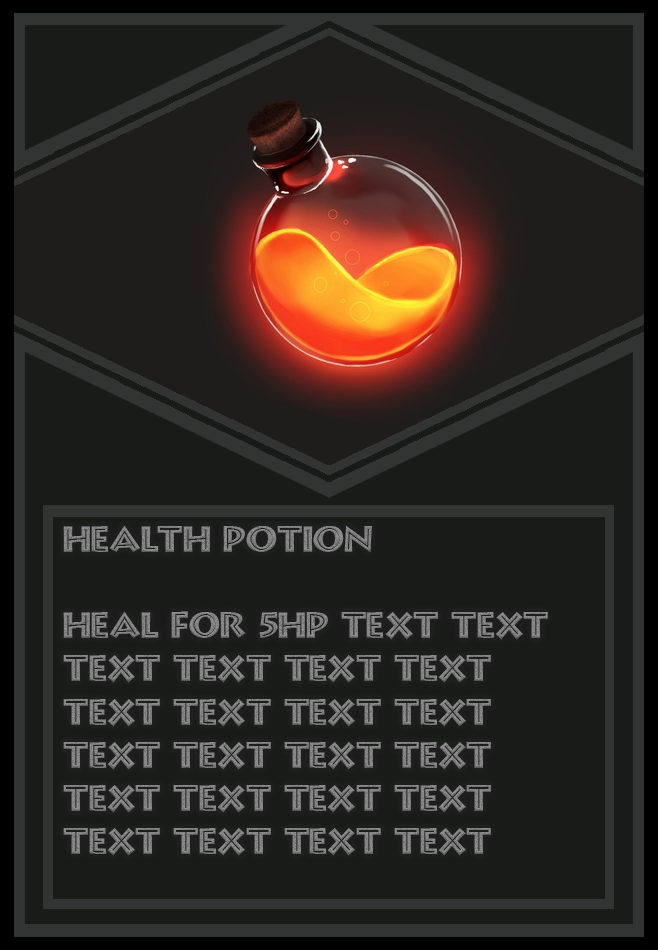
<style>
.page{position:relative;width:658px;height:950px;background:#191b19}
.page>*{position:absolute;margin:0}
.t1{font:36px "GreekDinerInlineTT";color:#828282}
</style>
<div class="page">
<p class="t1" style="left:63px;top:526px;width:485px;height:330px">Health Potion<br><br>Heal for 5hp text text text text text text text text text text text text text text text text text text text text text text text</p>
</div>
